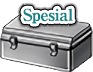
<style>
.page{position:relative;width:93px;height:72px;background:#ffffff}
.page>*{position:absolute;margin:0}
.t1{font:16px "RyuminPro-ExBold";letter-spacing:-0.04em;color:#168486}
</style>
<div class="page">
<p class="t1" style="left:23px;top:8px;width:50px;height:16px">Spesial</p>
</div>
